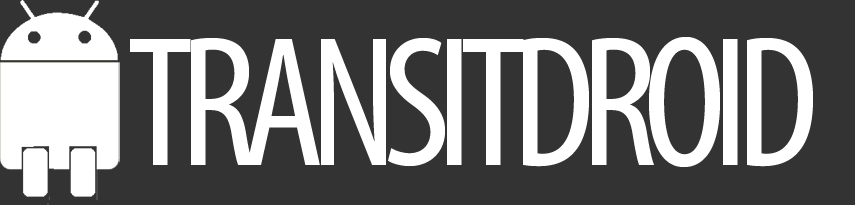
<style>
.page{position:relative;width:855px;height:205px;background:#333333}
.page>*{position:absolute;margin:0}
.t1{font:186.5px "MyriadPro-Cond";letter-spacing:-0.075em;color:#ffffff}
</style>
<div class="page">
<p class="t1" style="left:130px;top:37px;width:683px;height:131px">TRANSITDROID</p>
</div>
